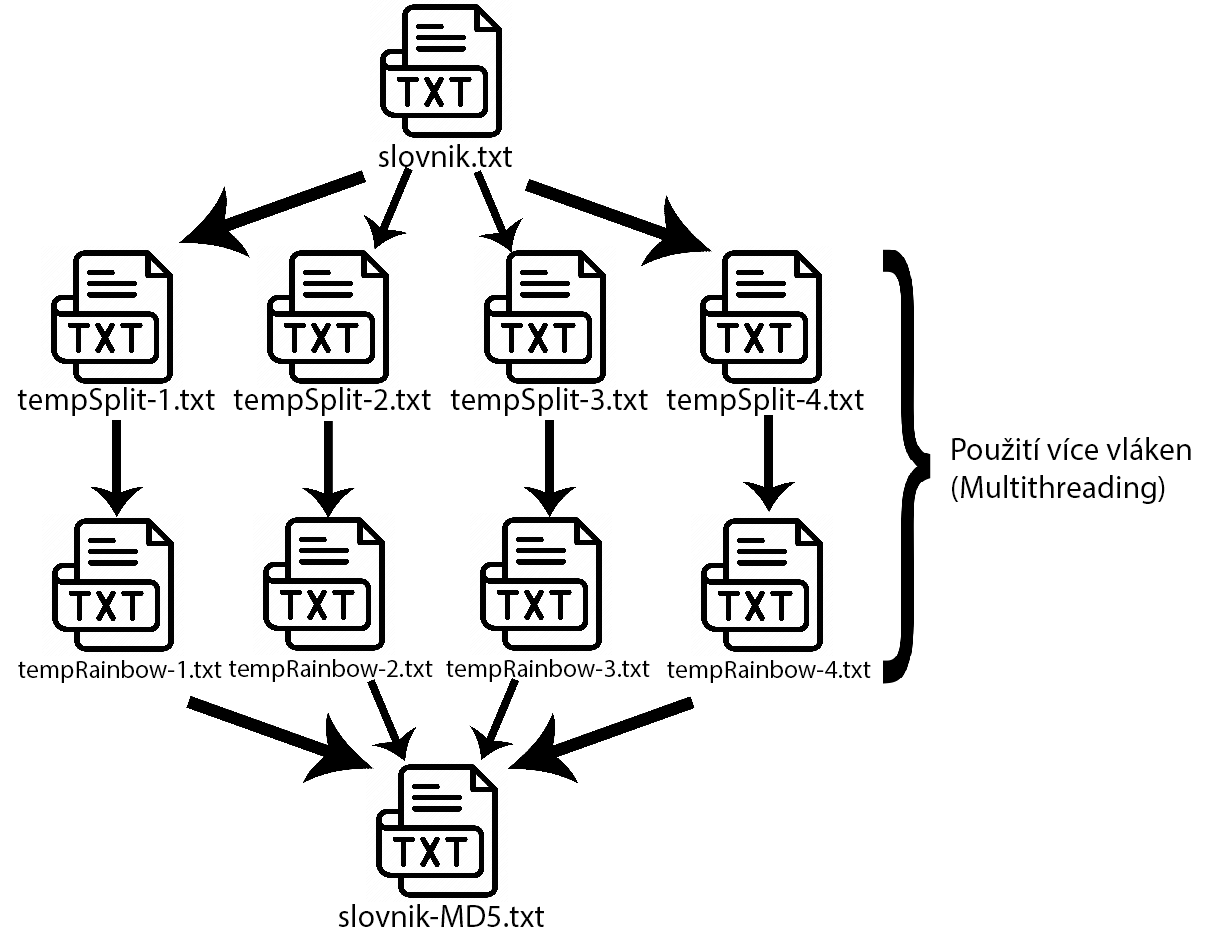
<style>
.page{position:relative;width:1209px;height:951px;background:#ffffff}
.page>*{position:absolute;margin:0}
.t1{font:31.8px "MyriadPro-Regular";color:#000000}
.t2{font:25.4px "MyriadPro-Regular";color:#000000}
.t3{font:31.7px "MyriadPro-Regular";color:#000000}
</style>
<div class="page">
<p class="t1" style="left:378px;top:144px;width:134px;height:23px">slovnik.txt</p>
<p class="t1" style="left:17px;top:387px;width:198px;height:29px">tempSplit-1.txt</p>
<p class="t1" style="left:233px;top:387px;width:198px;height:29px">tempSplit-2.txt</p>
<p class="t1" style="left:450px;top:387px;width:198px;height:29px">tempSplit-3.txt</p>
<p class="t1" style="left:666px;top:387px;width:198px;height:29px">tempSplit-4.txt</p>
<p class="t1" style="left:952px;top:437px;width:239px;height:67px">Použití více vláken<br>(Multithreading)</p>
<p class="t2" style="left:18px;top:660px;width:204px;height:23px">tempRainbow-1.txt</p>
<p class="t2" style="left:229px;top:659px;width:204px;height:23px">tempRainbow-2.txt</p>
<p class="t2" style="left:446px;top:659px;width:204px;height:23px">tempRainbow-3.txt</p>
<p class="t2" style="left:667px;top:660px;width:204px;height:23px">tempRainbow-4.txt</p>
<p class="t3" style="left:338px;top:904px;width:206px;height:23px">slovnik-MD5.txt</p>
</div>
